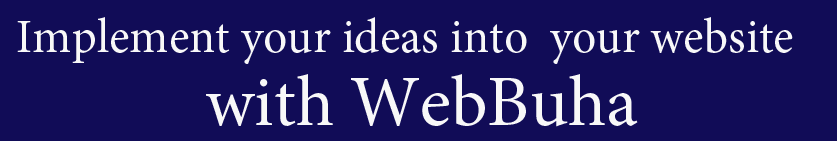
<style>
.page{position:relative;width:837px;height:141px;background:#110c57}
.page>*{position:absolute;margin:0}
.t1{font:48px "MinionPro-Regular";color:#f8f8f8}
.t2{font:72px "MinionPro-Regular";color:#f8f8f8}
</style>
<div class="page">
<p class="t1" style="left:17px;top:17px;width:776px;height:47px">Implement your ideas into  your website</p>
<p class="t2" style="left:206px;top:74px;width:432px;height:53px">with WebBuha</p>
</div>
